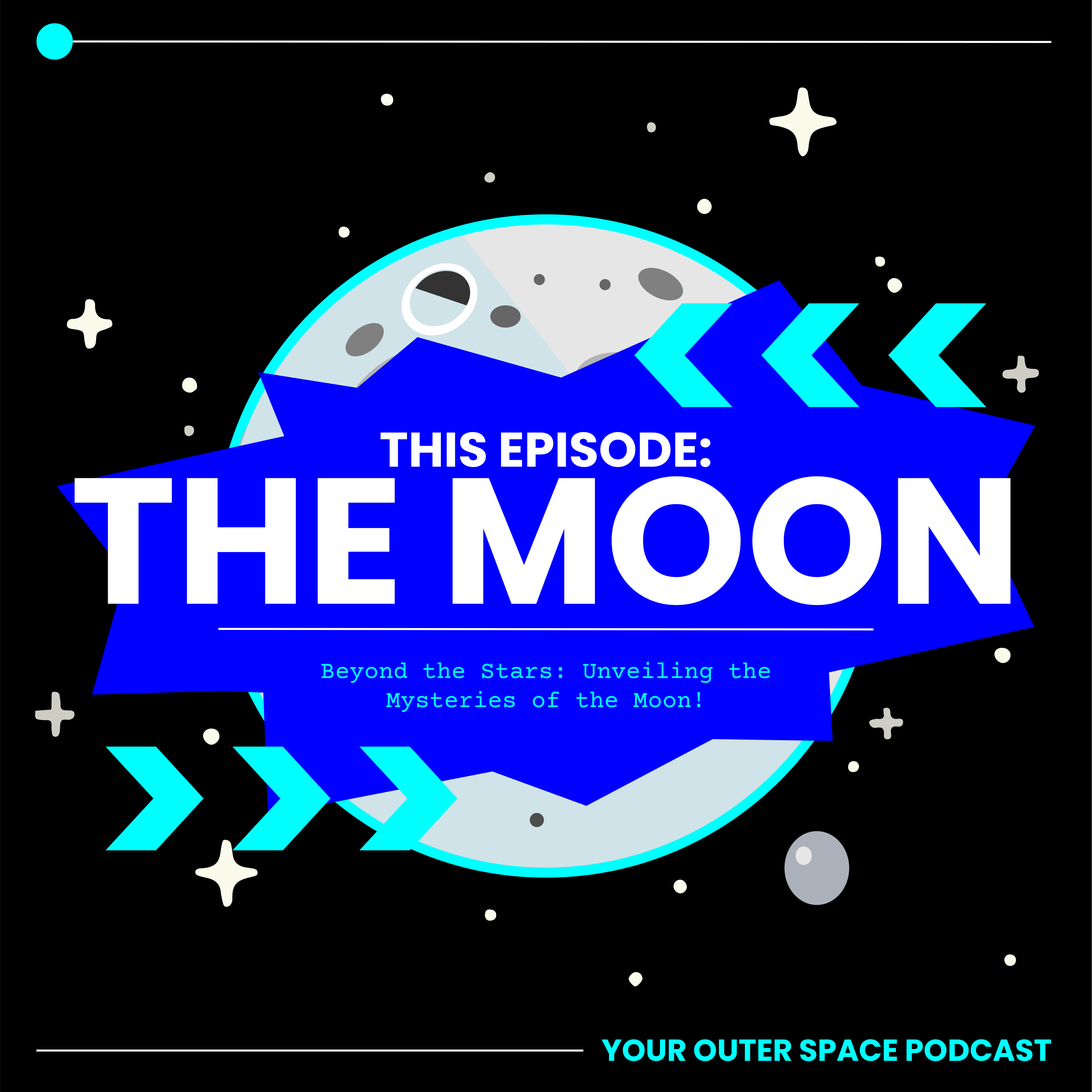
<style>
.page{position:relative;width:1092px;height:1092px;background:#000000}
.page>*{position:absolute;margin:0}
.t1{font:48.5px "Poppins-Bold";color:#ffffff}
.t2{font:178.9px "Poppins-Bold";color:#ffffff}
.t3{font:24.3px "CourierPrime-Regular";color:#00ffff}
.t4{font:30.3px "Poppins-Bold";color:#00ffff}
</style>
<div class="page">
<p class="t1" style="left:380px;top:432px;width:330px;height:35px">THIS EPISODE:</p>
<p class="t2" style="left:74px;top:476px;width:937px;height:129px">THE MOON</p>
<p class="t3" style="left:321px;top:662px;width:449px;height:50px;text-align:center">Beyond the Stars: Unveiling the Mysteries of the Moon!</p>
<p class="t4" style="left:601px;top:1039px;width:450px;height:22px">YOUR OUTER SPACE PODCAST</p>
</div>
